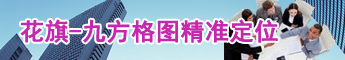
<style>
.page{position:relative;width:345px;height:60px}
.page>*{position:absolute;margin:0}
.t1{font:24px "SimHei";color:#c527ad;font-weight:bold}
</style>
<div class="page">
<p class="t1" style="left:20px;top:19px;width:258px;height:24px">花旗-九方格图精准定位</p>
</div>
